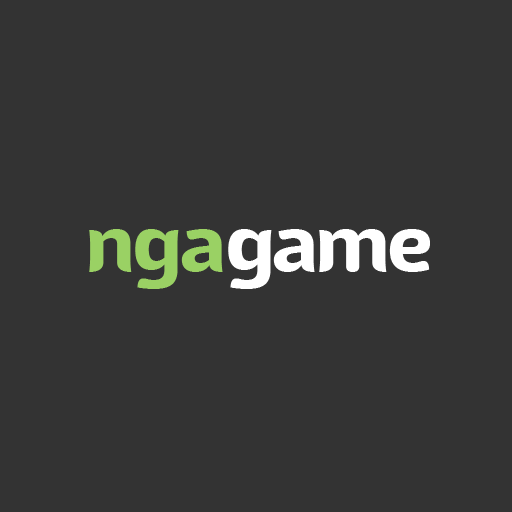
<style>
.page{position:relative;width:512px;height:512px;background:#333333}
.page>*{position:absolute;margin:0}
.t1{font:90px "SansMateo-Bold";letter-spacing:-0.05em;color:#9ad164}
.t2{font:90px "SansMateo-Bold";letter-spacing:-0.05em;color:#ffffff}
</style>
<div class="page">
<p class="t1" style="left:89px;top:229px;width:134px;height:60px">nga</p>
<p class="t2" style="left:228px;top:229px;width:202px;height:60px">game</p>
</div>
